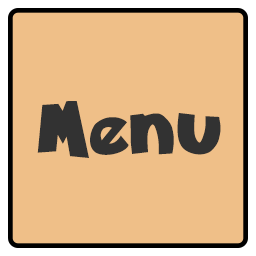
<style>
.page{position:relative;width:256px;height:256px;background:#efbf88}
.page>*{position:absolute;margin:0}
.t1{font:66.7px "PokemonSolidNormal";letter-spacing:0.1em;color:#323232}
</style>
<div class="page">
<p class="t1" style="left:37px;top:101px;width:184px;height:57px">Menu</p>
</div>
